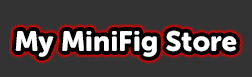
<style>
.page{position:relative;width:252px;height:77px;background:#333333}
.page>*{position:absolute;margin:0}
.t1{font:28px "MuseoSansRounded-900";letter-spacing:0.01em;color:#ffffff}
</style>
<div class="page">
<p class="t1" style="left:15px;top:30px;width:222px;height:27px">My MiniFig Store</p>
</div>
